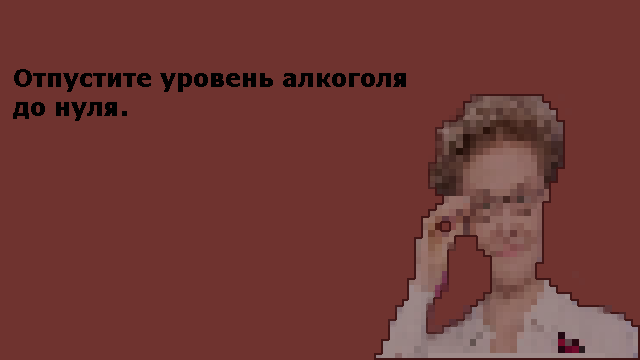
<style>
.page{position:relative;width:640px;height:360px;background:#6f332f}
.page>*{position:absolute;margin:0}
.t1{font:24px "Verdana-Bold";color:#000000}
</style>
<div class="page">
<p class="t1" style="left:13px;top:69px;width:393px;height:52px;text-align:right">Отпустите уровень алкоголя<br>до нуля.</p>
</div>
